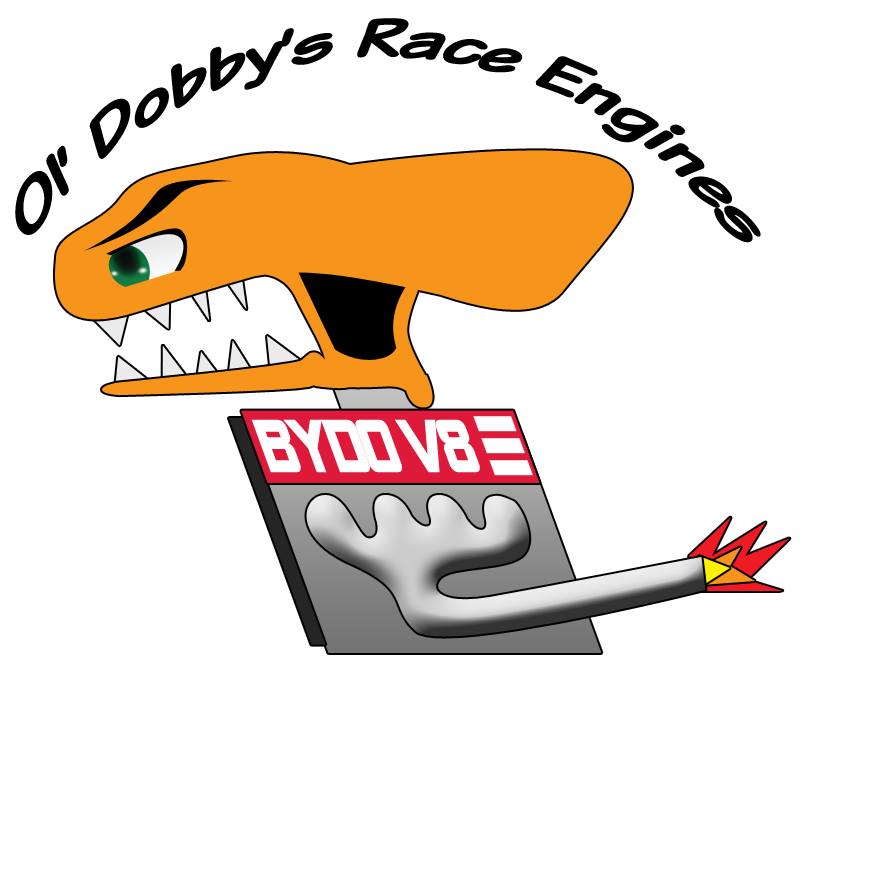
<style>
.page{position:relative;width:876px;height:876px;background:#ffffff}
.page>*{position:absolute;margin:0}
.t1{font:57.6px "KomikaText-BoldItalic";color:#000000}
.t2{font:76.6px "AlienEncounters";letter-spacing:-0.05em;color:#ffffff;font-weight:bold;scale:0.66 1}
</style>
<div class="page">
<p class="t1" style="left:15px;top:18px;width:746px;height:225px;text-align:center">Ol’ Dobby’s Race Engines</p>
<p class="t2" style="left:251px;top:419px;width:229px;height:54px">BYDO V8</p>
</div>
